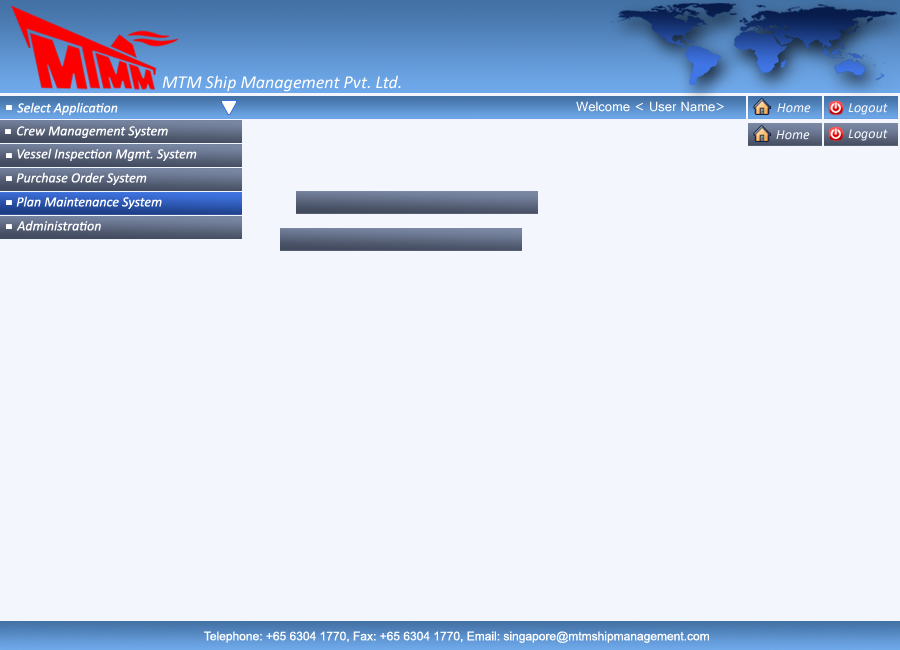
<style>
.page{position:relative;width:900px;height:650px;background:#f3f6fd}
.page>*{position:absolute;margin:0}
.t1{font:18px "Calibri-Italic";color:#ffffff}
.t2{font:14px "Calibri-Italic";color:#ffffff}
.t3{font:14px "Gautami";color:#ffffff}
.t4{font:14px "Calibri-Italic";color:#f3f6fd}
.t5{font:12px "ArialMT";color:#ffffff}
</style>
<div class="page">
<p class="t1" style="left:162px;top:75px;width:239px;height:17px">MTM Ship Management Pvt. Ltd.</p>
<p class="t2" style="left:17px;top:102px;width:101px;height:13px">Select Application</p>
<p class="t3" style="left:576px;top:101px;width:148px;height:11px">Welcome &lt; User Name&gt;</p>
<p class="t4" style="left:777px;top:103px;width:34px;height:10px">Home</p>
<p class="t4" style="left:848px;top:103px;width:40px;height:12px">Logout</p>
<p class="t2" style="left:17px;top:126px;width:151px;height:12px">Crew Management System</p>
<p class="t4" style="left:776px;top:130px;width:34px;height:10px">Home</p>
<p class="t4" style="left:848px;top:129px;width:40px;height:12px">Logout</p>
<p class="t2" style="left:17px;top:148px;width:180px;height:13px">Vessel Inspection Mgmt. System</p>
<p class="t2" style="left:16px;top:172px;width:131px;height:13px">Purchase Order System</p>
<p class="t2" style="left:16px;top:196px;width:146px;height:13px">Plan Maintenance System</p>
<p class="t2" style="left:16px;top:220px;width:85px;height:11px">Administration</p>
<p class="t5" style="left:204px;top:631px;width:505px;height:12px">Telephone: +65 6304 1770, Fax: +65 6304 1770, Email: singapore@mtmshipmanagement.com</p>
</div>
